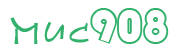
<style>
.page{position:relative;width:180px;height:54px;background:#ffffff}
.page>*{position:absolute;margin:0}
.t1{font:36px "FZKATFW--GB1-0";letter-spacing:0.05em;color:#32b16c}
.t2{font:48px "STCaiyun";letter-spacing:-0.025em;color:#32b16c}
</style>
<div class="page">
<p class="t1" style="left:10px;top:8px;width:159px;height:36px">Muc<span class="t2">908</span></p>
</div>
